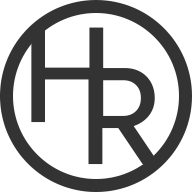
<style>
.page{position:relative;width:192px;height:192px;background:#ffffff}
.page>*{position:absolute;margin:0}
.t1{font:128px "SUIT-Bold";letter-spacing:0.24em;color:#333333}
.t2{font:130px "SUIT-Bold";letter-spacing:0.24em;color:#333333}
</style>
<div class="page">
<p class="t1" style="left:31px;top:27px;width:73px;height:96px">H</p>
<p class="t2" style="left:88px;top:68px;width:72px;height:97px">R</p>
</div>
